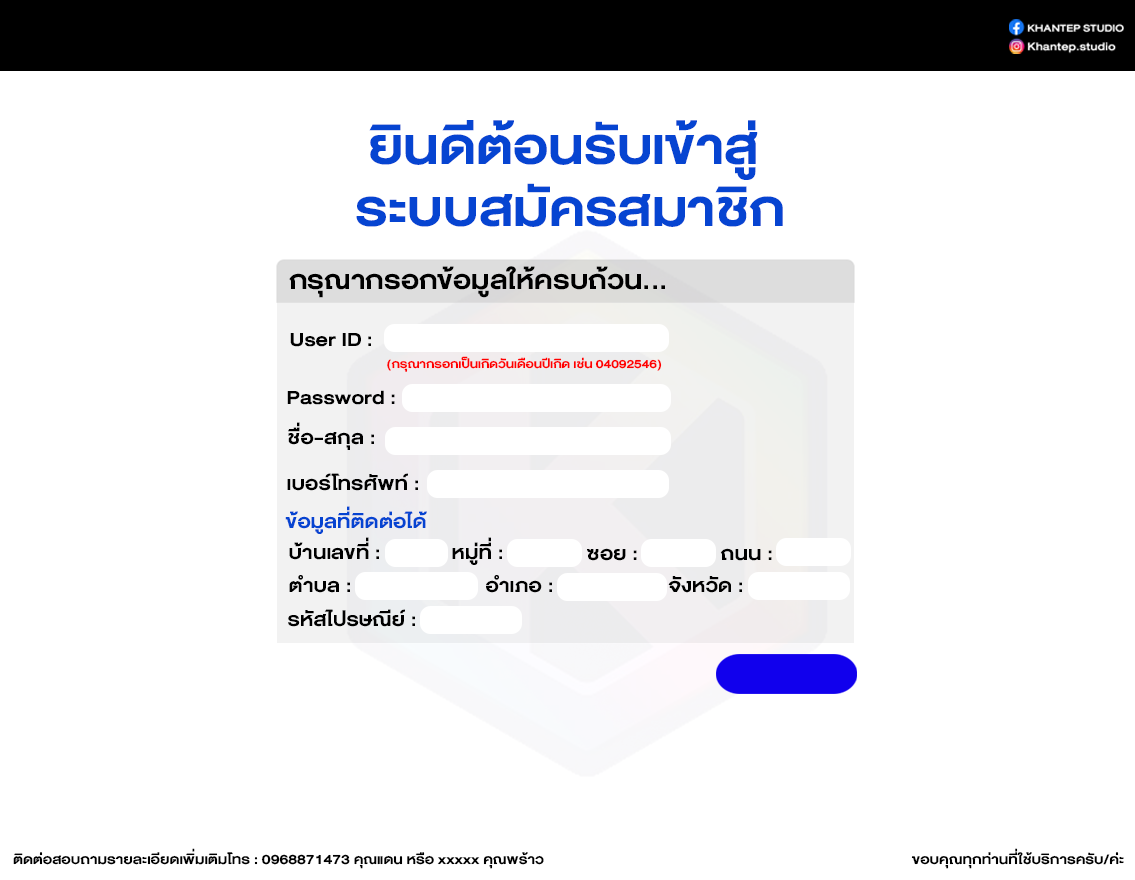
<style>
.page{position:relative;width:1135px;height:880px;background:#ffffff}
.page>*{position:absolute;margin:0}
.t1{font:75px "DBHelvethaicaX-BdExt";color:#0644d1}
.t2{font:38.6px "DBHelvethaicaX-BdExt";color:#000000}
.t3{font:28.4px "DBHelvethaicaX-BdExt";color:#000000}
.t4{font:17.4px "DBHelvethaicaX-BdExt";color:#ff0000}
.t5{font:28.4px "DBHelvethaicaX-BdExt";color:#0644d1}
.t6{font:20px "DBHelvethaicaX-BdExt";color:#000000}
</style>
<div class="page">
<p class="t1" style="left:369px;top:120px;width:389px;height:60px">ยินดีต้อนรับเข้าสู่</p>
<p class="t1" style="left:356px;top:183px;width:427px;height:44px">ระบบสมัครสมาชิก</p>
<p class="t2" style="left:289px;top:266px;width:376px;height:32px">กรุณากรอกข้อมูลให้ครบถ้วน...</p>
<p class="t3" style="left:290px;top:333px;width:81px;height:14px">User ID :</p>
<p class="t4" style="left:387px;top:356px;width:275px;height:16px">(กรุณากรอกเป็นเกิดวันเดือนปีเกิด เช่น 04092546)</p>
<p class="t3" style="left:287px;top:390px;width:108px;height:15px">Password :</p>
<p class="t3" style="left:288px;top:422px;width:86px;height:28px">ชื่อ-สกุล :</p>
<p class="t3" style="left:287px;top:473px;width:131px;height:18px">เบอร์โทรศัพท์ :</p>
<p class="t5" style="left:285px;top:506px;width:142px;height:28px">ข้อมูลที่ติดต่อได้</p>
<p class="t3" style="left:289px;top:537px;width:90px;height:23px">บ้านเลขที่ :</p>
<p class="t3" style="left:452px;top:537px;width:50px;height:28px">หมู่ที่ :</p>
<p class="t3" style="left:587px;top:548px;width:50px;height:13px">ซอย :</p>
<p class="t3" style="left:720px;top:548px;width:52px;height:13px">ถนน :</p>
<p class="t3" style="left:289px;top:575px;width:61px;height:18px">ตำบล :</p>
<p class="t3" style="left:486px;top:575px;width:66px;height:18px">อำเภอ :</p>
<p class="t3" style="left:668px;top:576px;width:74px;height:17px">จังหวัด :</p>
<p class="t3" style="left:288px;top:609px;width:127px;height:18px">รหัสไปรษณีย์ :</p>
<p class="t6" style="left:13px;top:848px;width:531px;height:21px">ติดต่อสอบถามรายละเอียดเพิ่มเติมโทร : 0968871473 คุณแดน หรือ xxxxx คุณพร้าว</p>
<p class="t6" style="left:911px;top:848px;width:213px;height:21px">ขอบคุณทุกท่านที่ใช้บริการครับ/ค่ะ</p>
</div>
